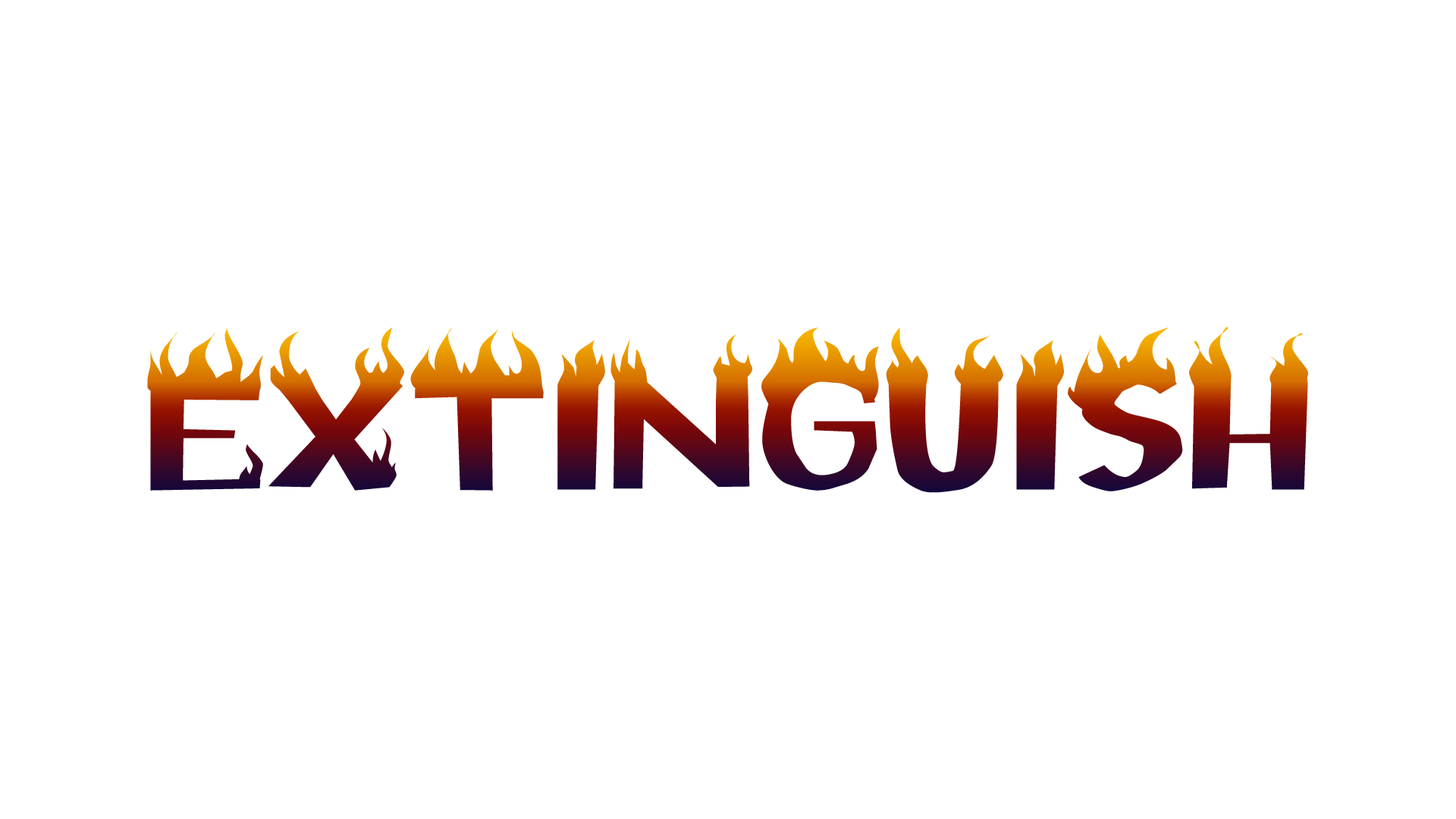
<style>
.page{position:relative;width:1456px;height:819px;background:#ffffff}
.page>*{position:absolute;margin:0}
.t1{font:203.4px "Flame"}
</style>
<div class="page">
<p class="t1" style="left:147px;top:327px;width:1161px;height:166px">EXTINGUISH</p>
</div>
